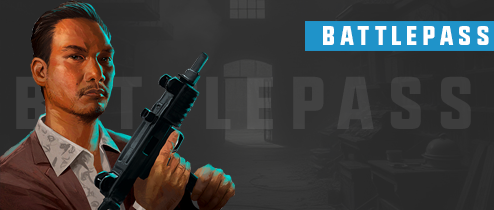
<style>
.page{position:relative;width:494px;height:210px}
.page>*{position:absolute;margin:0}
.t1{font:27px "UpboltersNew";letter-spacing:0.18em;color:#ffffff;text-transform:uppercase}
</style>
<div class="page">
<p class="t1" style="left:323px;top:26px;width:166px;height:19px">BattlePass</p>
</div>
